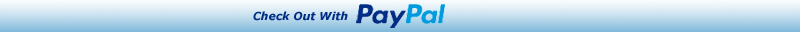
<style>
.page{position:relative;width:800px;height:32px}
.page>*{position:absolute;margin:0}
.t1{font:11px "Verdana-BoldItalic";color:#002e85}
</style>
<div class="page">
<p class="t1" style="left:253px;top:11px;width:95px;height:10px">Check Out With</p>
</div>
